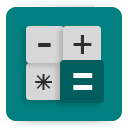
<style>
.page{position:relative;width:128px;height:128px;background:#008080}
.page>*{position:absolute;margin:0}
.t1{font:46.9px "Gautami";color:#2e2e2e}
.t2{font:60px "Gautami";color:#ffffff}
</style>
<div class="page">
<p class="t1" style="left:73px;top:35px;width:19px;height:19px">+</p>
<p class="t1" style="left:38px;top:43px;width:13px;height:4px">-</p>
<p class="t1" style="left:35px;top:74px;width:17px;height:16px">*</p>
<p class="t2" style="left:73px;top:73px;width:20px;height:17px">=</p>
</div>
